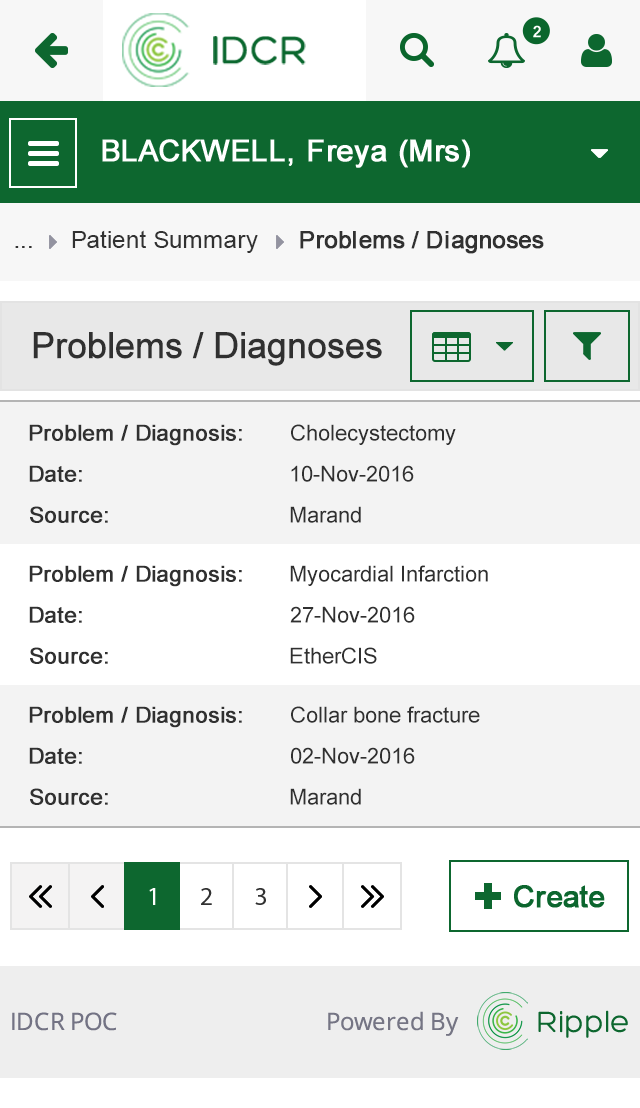
<style>
.page{position:relative;width:640px;height:1108px;background:#ffffff}
.page>*{position:absolute;margin:0}
.t1{font:24px "ArialMT";color:#313131}
.t2{font:24px "ArialMT";color:#313131;font-weight:bold}
.t3{font:36px "ArialMT";color:#303030;font-weight:bold}
.t4{font:22px "ArialMT";color:#303030;font-weight:bold}
.t5{font:22px "ArialMT";color:#303030}
</style>
<div class="page">
<p class="t1" style="left:72px;top:230px;width:186px;height:23px">Patient Summary</p>
<p class="t2" style="left:300px;top:231px;width:244px;height:23px">Problems / Diagnoses</p>
<p class="t1" style="left:15px;top:246px;width:17px;height:2px">...</p>
<p class="t3" style="left:33px;top:332px;width:349px;height:34px">Problems / Diagnoses</p>
<p class="t4" style="left:29px;top:424px;width:213px;height:22px">Problem / Diagnosis:</p>
<p class="t5" style="left:291px;top:424px;width:165px;height:21px">Cholecystectomy</p>
<p class="t4" style="left:29px;top:465px;width:53px;height:17px">Date:</p>
<p class="t5" style="left:291px;top:465px;width:123px;height:17px">10-Nov-2016</p>
<p class="t4" style="left:30px;top:506px;width:78px;height:17px">Source:</p>
<p class="t5" style="left:290px;top:506px;width:71px;height:17px">Marand</p>
<p class="t4" style="left:29px;top:565px;width:213px;height:22px">Problem / Diagnosis:</p>
<p class="t5" style="left:290px;top:565px;width:198px;height:21px">Myocardial Infarction</p>
<p class="t4" style="left:29px;top:606px;width:53px;height:17px">Date:</p>
<p class="t5" style="left:290px;top:606px;width:125px;height:17px">27-Nov-2016</p>
<p class="t4" style="left:30px;top:647px;width:78px;height:17px">Source:</p>
<p class="t5" style="left:290px;top:647px;width:87px;height:17px">EtherCIS</p>
<p class="t4" style="left:29px;top:706px;width:213px;height:22px">Problem / Diagnosis:</p>
<p class="t5" style="left:291px;top:706px;width:189px;height:17px">Collar bone fracture</p>
<p class="t4" style="left:29px;top:747px;width:53px;height:17px">Date:</p>
<p class="t5" style="left:291px;top:747px;width:124px;height:17px">02-Nov-2016</p>
<p class="t4" style="left:30px;top:788px;width:78px;height:17px">Source:</p>
<p class="t5" style="left:290px;top:788px;width:71px;height:17px">Marand</p>
</div>
